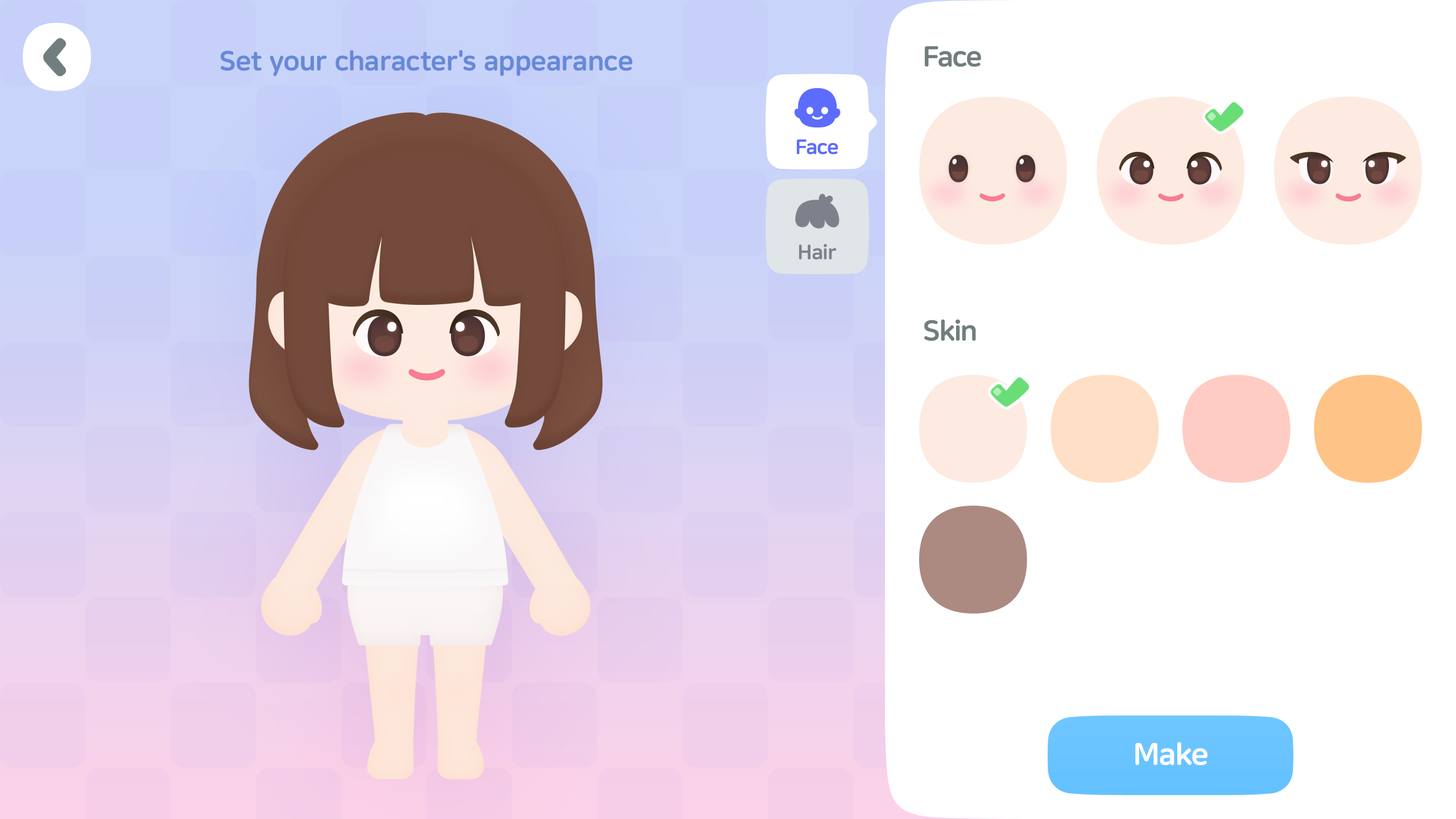
<style>
.page{position:relative;width:1456px;height:819px;background:#ffffff}
.page>*{position:absolute;margin:0}
.t1{font:27.3px "NanumSquareRoundEB";color:#6689d8}
.t2{font:28.4px "NanumSquareRoundEB";letter-spacing:-0.025em;color:#727e7e}
.t3{font:20.5px "NanumSquareRoundEB";letter-spacing:-0.025em;color:#5c6cfc}
.t4{font:20.5px "NanumSquareRoundEB";letter-spacing:-0.025em;color:#7d818c}
.t5{font:30.7px "NanumSquareRoundEB";letter-spacing:-0.025em;color:#ffffff}
</style>
<div class="page">
<p class="t1" style="left:221px;top:50px;width:411px;height:26px">Set your character's appearance</p>
<p class="t2" style="left:925px;top:46px;width:56px;height:21px">Face</p>
<p class="t3" style="left:797px;top:139px;width:41px;height:16px">Face</p>
<p class="t4" style="left:799px;top:244px;width:38px;height:16px">Hair</p>
<p class="t2" style="left:924px;top:319px;width:52px;height:22px">Skin</p>
<p class="t5" style="left:1135px;top:742px;width:72px;height:24px">Make</p>
</div>
